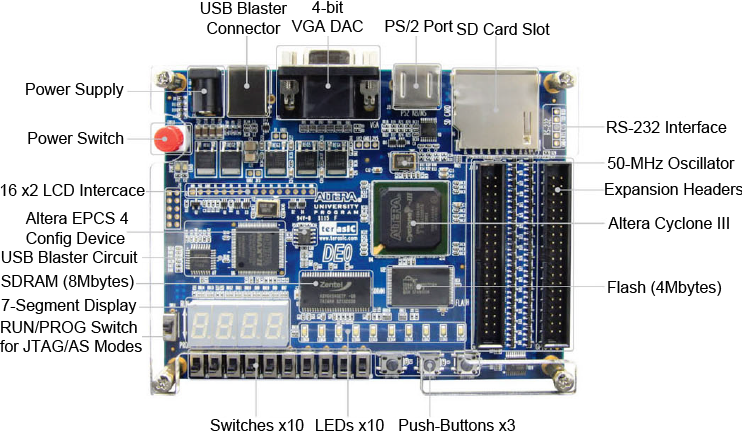
<style>
.page{position:relative;width:742px;height:431px;background:#ffffff}
.page>*{position:absolute;margin:0}
.t1{font:16px "ArialMT";color:#000000}
</style>
<div class="page">
<p class="t1" style="left:200px;top:2px;width:87px;height:32px;text-align:center">USB Blaster<br>Connector</p>
<p class="t1" style="left:291px;top:1px;width:72px;height:31px;text-align:center">4-bit<br>VGA DAC</p>
<p class="t1" style="left:385px;top:20px;width:68px;height:12px">PS/2 Port</p>
<p class="t1" style="left:457px;top:23px;width:93px;height:12px">SD Card Slot</p>
<p class="t1" style="left:26px;top:83px;width:98px;height:15px">Power Supply</p>
<p class="t1" style="left:607px;top:121px;width:120px;height:12px">RS-232 Interface</p>
<p class="t1" style="left:28px;top:132px;width:96px;height:12px">Power Switch</p>
<p class="t1" style="left:608px;top:157px;width:127px;height:12px">50-MHz Oscillator</p>
<p class="t1" style="left:0px;top:184px;width:145px;height:12px">16 x2 LCD Intercace</p>
<p class="t1" style="left:605px;top:183px;width:138px;height:15px">Expansion Headers</p>
<p class="t1" style="left:25px;top:212px;width:104px;height:35px">Altera EPCS 4<br>Config Device</p>
<p class="t1" style="left:608px;top:217px;width:121px;height:15px">Altera Cyclone III</p>
<p class="t1" style="left:1px;top:251px;width:137px;height:12px">USB Blaster Circuit</p>
<p class="t1" style="left:1px;top:275px;width:133px;height:15px">SDRAM (8Mbytes)</p>
<p class="t1" style="left:608px;top:281px;width:114px;height:15px">Flash (4Mbytes)</p>
<p class="t1" style="left:1px;top:299px;width:136px;height:15px">7-Segment Display</p>
<p class="t1" style="left:0px;top:321px;width:142px;height:31px">RUN/PROG Switch<br>for JTAG/AS Modes</p>
<p class="t1" style="left:210px;top:419px;width:94px;height:12px">Switches x10</p>
<p class="t1" style="left:316px;top:419px;width:68px;height:12px">LEDs x10</p>
<p class="t1" style="left:399px;top:419px;width:116px;height:12px">Push-Buttons x3</p>
</div>
